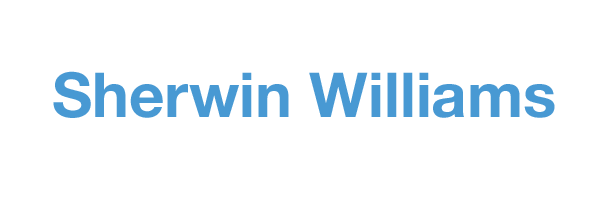
<style>
.page{position:relative;width:596px;height:197px;background:#ffffff}
.page>*{position:absolute;margin:0}
.t1{font:62px "HelveticaNeue-Bold";color:#4899d3}
</style>
<div class="page">
<p class="t1" style="left:53px;top:71px;width:502px;height:47px">Sherwin Williams</p>
</div>
